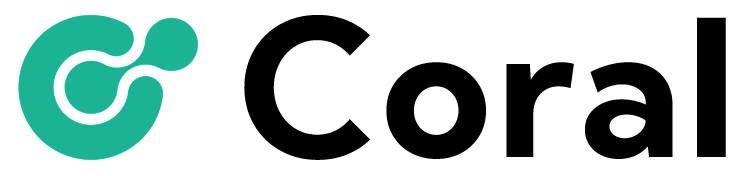
<style>
.page{position:relative;width:744px;height:176px;background:#ffffff}
.page>*{position:absolute;margin:0}
.t1{font:190px "KumbhSans-Bold";letter-spacing:0.02em;color:#000000}
</style>
<div class="page">
<p class="t1" style="left:244px;top:15px;width:482px;height:145px">Coral</p>
</div>
